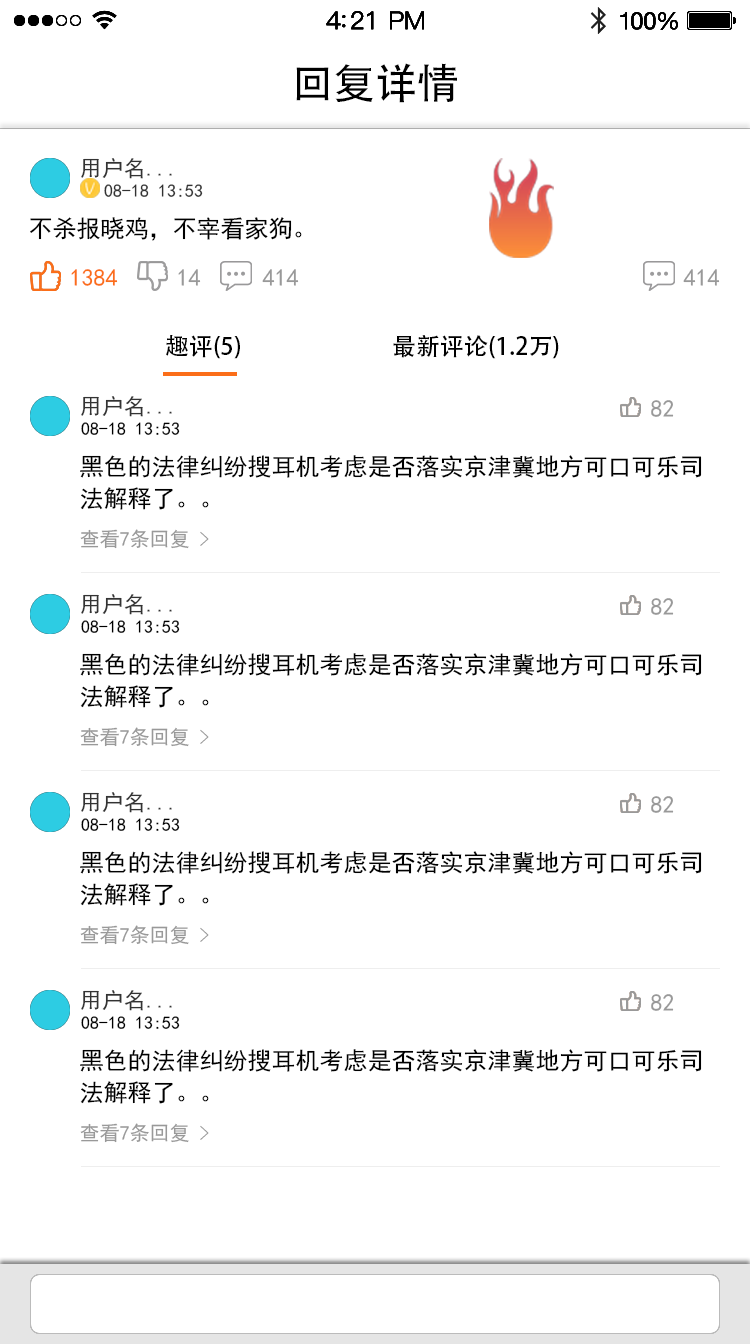
<style>
.page{position:relative;width:750px;height:1344px;background:#ffffff}
.page>*{position:absolute;margin:0}
.t1{font:42px "PingFang-SC-Medium";color:#000000}
.t2{font:22px "SimHei";color:#333333}
.t3{font:18px "SimHei";color:#333333}
.t4{font:24px "SimHei";color:#000000}
.t5{font:24px "SimHei";color:#fb6e19}
.t6{font:24px "SimHei";color:#999999}
.t7{font:24px "AdobeHeitiStd-Regular";color:#000000}
.t8{font:18px "SimHei";color:#000000}
.t9{font:24px/32px "SimHei";color:#000000}
.t10{font:20px "SimHei";color:#999999}
</style>
<div class="page">
<p class="t1" style="left:296px;top:63px;width:161px;height:40px">回复详情</p>
<p class="t2" style="left:81px;top:158px;width:91px;height:21px">用户名...</p>
<p class="t3" style="left:104px;top:184px;width:99px;height:13px">08-18 13:53</p>
<p class="t4" style="left:30px;top:217px;width:272px;height:24px">不杀报晓鸡，不宰看家狗。</p>
<p class="t5" style="left:71px;top:269px;width:47px;height:17px">1384</p>
<p class="t6" style="left:178px;top:269px;width:23px;height:17px">14</p>
<p class="t6" style="left:262px;top:269px;width:37px;height:17px">414</p>
<p class="t6" style="left:683px;top:269px;width:37px;height:17px">414</p>
<p class="t7" style="left:166px;top:335px;width:74px;height:24px">趣评(5)</p>
<p class="t7" style="left:393px;top:335px;width:166px;height:24px">最新评论(1.2万)</p>
<p class="t2" style="left:81px;top:396px;width:91px;height:21px">用户名...</p>
<p class="t6" style="left:651px;top:400px;width:23px;height:17px">82</p>
<p class="t8" style="left:81px;top:422px;width:99px;height:13px">08-18 13:53</p>
<p class="t9" style="left:80px;top:455px;width:622px;height:55px">黑色的法律纠纷搜耳机考虑是否落实京津冀地方可口可乐司<br>法解释了。。</p>
<p class="t10" style="left:80px;top:529px;width:129px;height:20px">查看7条回复 &gt;</p>
<p class="t2" style="left:81px;top:594px;width:91px;height:21px">用户名...</p>
<p class="t6" style="left:651px;top:598px;width:23px;height:17px">82</p>
<p class="t8" style="left:81px;top:620px;width:99px;height:13px">08-18 13:53</p>
<p class="t9" style="left:80px;top:653px;width:622px;height:55px">黑色的法律纠纷搜耳机考虑是否落实京津冀地方可口可乐司<br>法解释了。。</p>
<p class="t10" style="left:80px;top:727px;width:129px;height:20px">查看7条回复 &gt;</p>
<p class="t2" style="left:81px;top:792px;width:91px;height:21px">用户名...</p>
<p class="t6" style="left:651px;top:796px;width:23px;height:17px">82</p>
<p class="t8" style="left:81px;top:818px;width:99px;height:13px">08-18 13:53</p>
<p class="t9" style="left:80px;top:851px;width:622px;height:55px">黑色的法律纠纷搜耳机考虑是否落实京津冀地方可口可乐司<br>法解释了。。</p>
<p class="t10" style="left:80px;top:925px;width:129px;height:20px">查看7条回复 &gt;</p>
<p class="t2" style="left:81px;top:990px;width:91px;height:21px">用户名...</p>
<p class="t6" style="left:651px;top:994px;width:23px;height:17px">82</p>
<p class="t8" style="left:81px;top:1016px;width:99px;height:13px">08-18 13:53</p>
<p class="t9" style="left:80px;top:1049px;width:622px;height:55px">黑色的法律纠纷搜耳机考虑是否落实京津冀地方可口可乐司<br>法解释了。。</p>
<p class="t10" style="left:80px;top:1123px;width:129px;height:20px">查看7条回复 &gt;</p>
</div>
